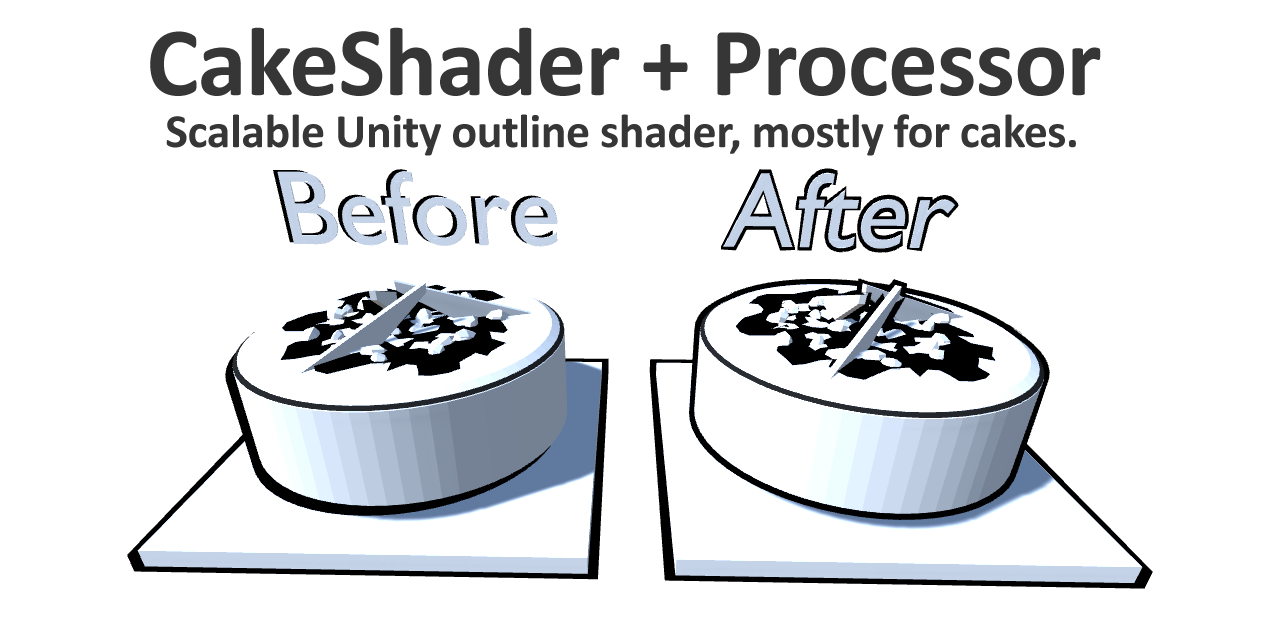
<style>
.page{position:relative;width:1280px;height:640px;background:#ffffff}
.page>*{position:absolute;margin:0}
.t1{font:99.1px "Calibri-Bold";letter-spacing:-0.01em;color:#363636}
.t2{font:48px "Calibri-Bold";letter-spacing:-0.01em;color:#363636}
</style>
<div class="page">
<p class="t1" style="left:150px;top:27px;width:951px;height:69px">CakeShader + Processor</p>
<p class="t2" style="left:166px;top:114px;width:910px;height:42px">Scalable Unity outline shader, mostly for cakes.</p>
</div>
